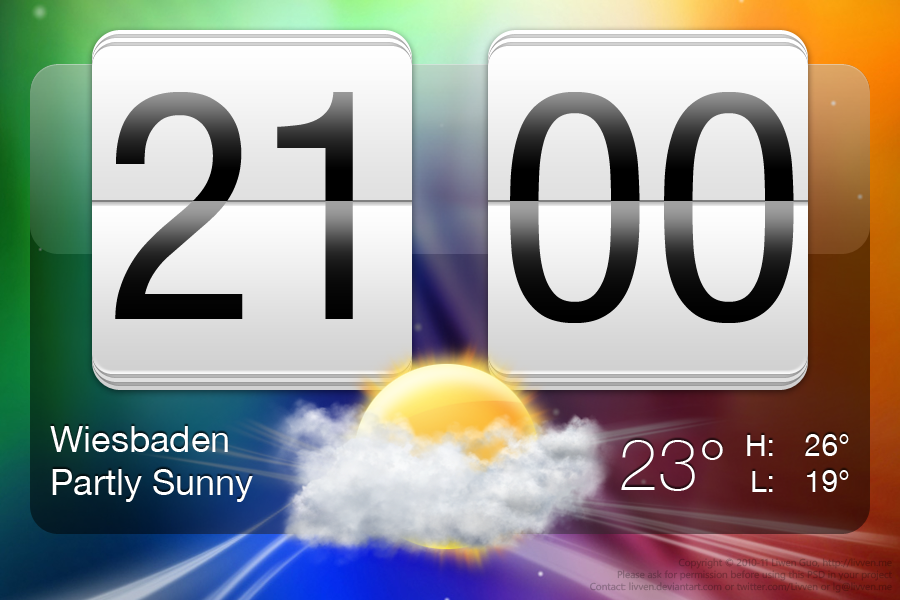
<style>
.page{position:relative;width:900px;height:600px}
.page>*{position:absolute;margin:0}
.t1{font:320px "HelveticaNeueLTCom-Cn"}
.t2{font:36px "HelveticaNeueLT-Roman";color:#ffffff}
.t3{font:30px "HelveticaNeueLT-Roman";color:#ffffff}
.t4{font:72px "HelveticaNeueLT-Thin";color:#ffffff}
.t5{font:10px "SegoeWP"}
</style>
<div class="page">
<p class="t1" style="left:115px;top:92px;width:238px;height:227px">21</p>
<p class="t1" style="left:510px;top:92px;width:284px;height:231px">00</p>
<p class="t2" style="left:50px;top:426px;width:203px;height:76px">Wiesbaden<br>Partly Sunny</p>
<p class="t3" style="left:747px;top:435px;width:26px;height:57px;text-align:right">H:<br>L:</p>
<p class="t3" style="left:805px;top:434px;width:44px;height:58px;text-align:right">26°<br>19°</p>
<p class="t4" style="left:621px;top:440px;width:102px;height:51px">23°</p>
<p class="t5" style="left:590px;top:558px;width:302px;height:35px;text-align:right">Copyright © 2010-11 Liwen Guo, http://livven.me<br>Please ask for permission before using this PSD in your project<br>Contact: livven.deviantart.com or twitter.com/Livven or lg@livven.me</p>
</div>
